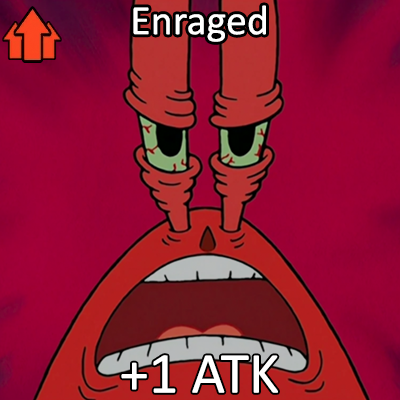
<style>
.page{position:relative;width:400px;height:400px}
.page>*{position:absolute;margin:0}
.t1{font:72px "Calibri";color:#ffffff}
.t2{font:100px "Calibri";color:#ffffff}
</style>
<div class="page">
<p class="t1" style="left:133px;top:5px;width:133px;height:37px">Enraged</p>
<p class="t2" style="left:121px;top:355px;width:157px;height:38px">+1 ATK</p>
</div>
